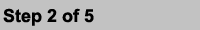
<style>
.page{position:relative;width:200px;height:30px;background:#c2c2c2}
.page>*{position:absolute;margin:0}
.t1{font:18px "Arial-BoldMT";color:#000000}
</style>
<div class="page">
<p class="t1" style="left:3px;top:8px;width:91px;height:18px">Step 2 of 5</p>
</div>
